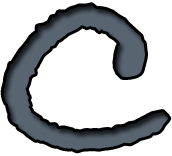
<style>
.page{position:relative;width:172px;height:156px;background:#ffffff}
.page>*{position:absolute;margin:0}
.t1{font:264.5px "BradleyHandITCTTBold";color:#586470;scale:1.06 1}
</style>
<div class="page">
<p class="t1" style="left:3px;top:5px;width:166px;height:146px;rotate:14deg">C</p>
</div>
